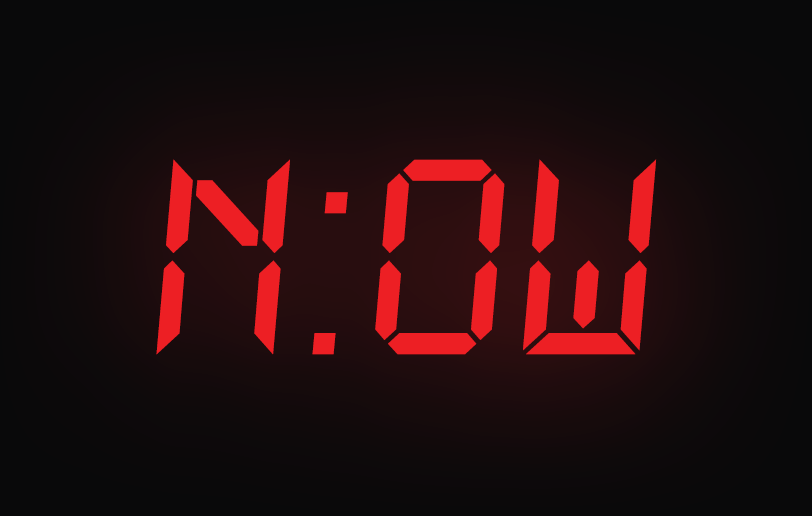
<style>
.page{position:relative;width:812px;height:516px}
.page>*{position:absolute;margin:0}
.t1{font:305.7px "DS-Digital-Italic";color:#ed1f24}
</style>
<div class="page">
<p class="t1" style="left:156px;top:159px;width:501px;height:196px">n:ow</p>
</div>
